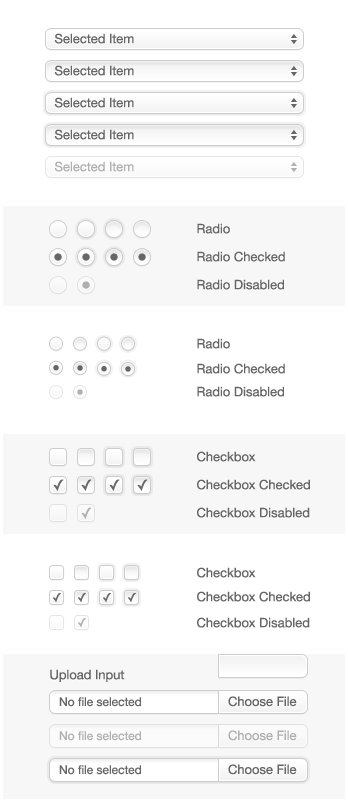
<style>
.page{position:relative;width:348px;height:801px;background:#ffffff}
.page>*{position:absolute;margin:0}
.t1{font:13px "HelveticaNeue";color:#666666}
.t2{font:13px "HelveticaNeue";color:#b1b1b1}
.t3{font:15px "LucidaGrande";color:#666666}
.t4{font:15px "LucidaGrande";color:#afafaf}
.t5{font:12.2px "LucidaGrande";color:#666666}
.t6{font:12.2px "LucidaGrande";color:#b0b0b0}
.t7{font:12px "HelveticaNeue";color:#666666}
.t8{font:12px "HelveticaNeue";color:#b0b0b0}
.t9{font:13px "HelveticaNeue";color:#afafaf}
</style>
<div class="page">
<p class="t1" style="left:54px;top:33px;width:80px;height:11px">Selected Item</p>
<p class="t1" style="left:54px;top:65px;width:80px;height:11px">Selected Item</p>
<p class="t1" style="left:54px;top:97px;width:80px;height:11px">Selected Item</p>
<p class="t1" style="left:54px;top:129px;width:80px;height:11px">Selected Item</p>
<p class="t2" style="left:54px;top:161px;width:80px;height:11px">Selected Item</p>
<p class="t1" style="left:197px;top:223px;width:33px;height:11px">Radio</p>
<p class="t1" style="left:197px;top:251px;width:88px;height:11px">Radio Checked</p>
<p class="t1" style="left:197px;top:279px;width:87px;height:11px">Radio Disabled</p>
<p class="t1" style="left:197px;top:338px;width:33px;height:11px">Radio</p>
<p class="t1" style="left:197px;top:363px;width:88px;height:11px">Radio Checked</p>
<p class="t1" style="left:197px;top:386px;width:87px;height:11px">Radio Disabled</p>
<p class="t1" style="left:197px;top:451px;width:59px;height:11px">Checkbox</p>
<p class="t3" style="left:53px;top:479px;width:11px;height:12px">✓</p>
<p class="t3" style="left:81px;top:479px;width:11px;height:12px">✓</p>
<p class="t3" style="left:109px;top:479px;width:11px;height:12px">✓</p>
<p class="t3" style="left:137px;top:479px;width:11px;height:12px">✓</p>
<p class="t1" style="left:197px;top:479px;width:113px;height:11px">Checkbox Checked</p>
<p class="t4" style="left:81px;top:507px;width:11px;height:12px">✓</p>
<p class="t1" style="left:197px;top:507px;width:113px;height:11px">Checkbox Disabled</p>
<p class="t1" style="left:197px;top:567px;width:59px;height:11px">Checkbox</p>
<p class="t5" style="left:53px;top:593px;width:8px;height:10px">✓</p>
<p class="t5" style="left:78px;top:593px;width:8px;height:10px">✓</p>
<p class="t5" style="left:103px;top:593px;width:8px;height:10px">✓</p>
<p class="t5" style="left:128px;top:593px;width:8px;height:10px">✓</p>
<p class="t1" style="left:197px;top:591px;width:113px;height:11px">Checkbox Checked</p>
<p class="t1" style="left:197px;top:617px;width:113px;height:11px">Checkbox Disabled</p>
<p class="t6" style="left:78px;top:618px;width:8px;height:10px">✓</p>
<p class="t1" style="left:50px;top:669px;width:75px;height:13px">Upload Input</p>
<p class="t7" style="left:59px;top:697px;width:82px;height:10px">No file selected</p>
<p class="t1" style="left:228px;top:696px;width:69px;height:11px">Choose File</p>
<p class="t8" style="left:59px;top:731px;width:82px;height:10px">No file selected</p>
<p class="t9" style="left:228px;top:730px;width:69px;height:11px">Choose File</p>
<p class="t7" style="left:59px;top:765px;width:82px;height:10px">No file selected</p>
<p class="t1" style="left:228px;top:764px;width:69px;height:11px">Choose File</p>
</div>
